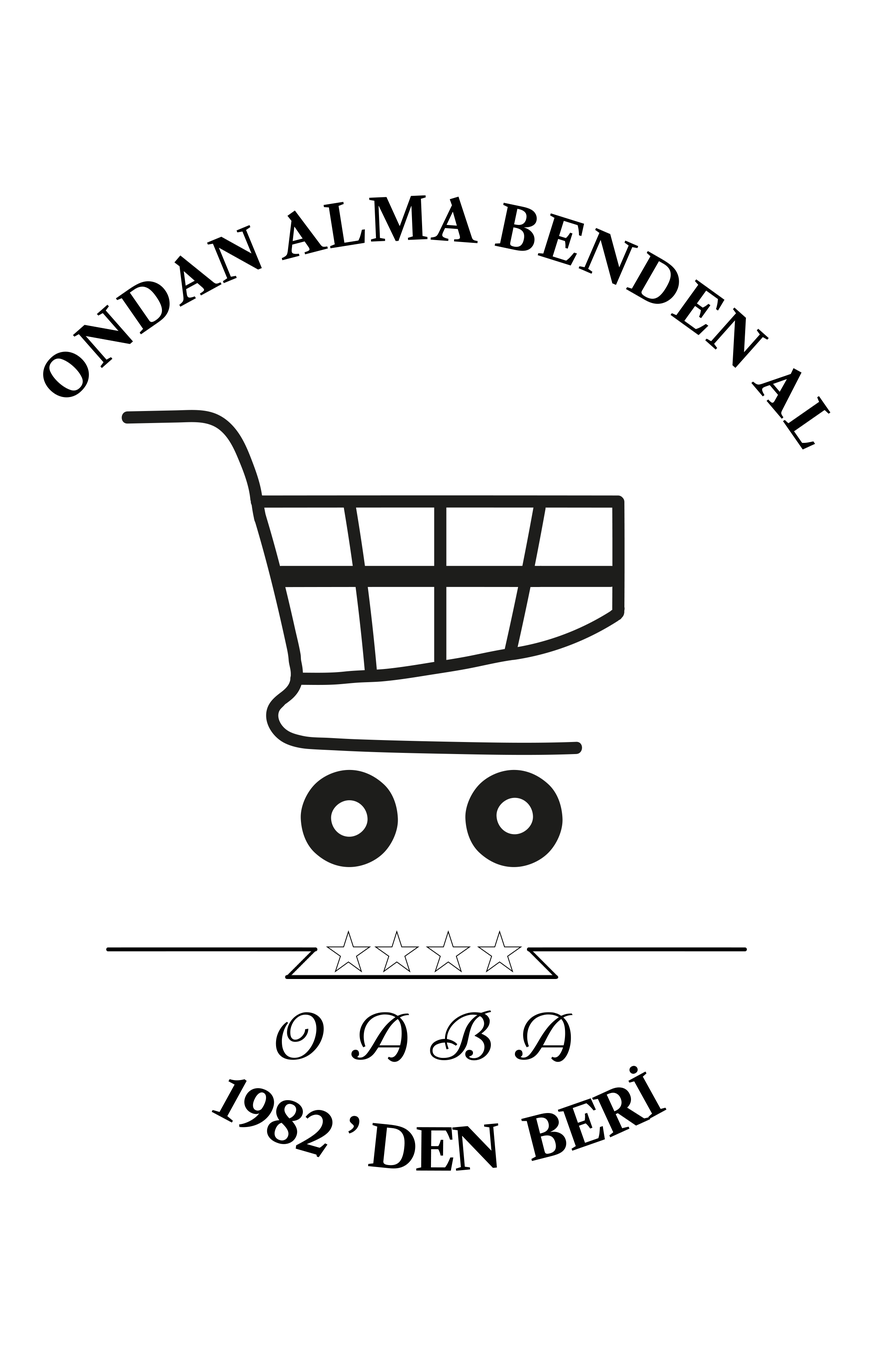
<style>
.page{position:relative;width:883px;height:1350px;background:#ffffff}
.page>*{position:absolute;margin:0}
.t1{font:56.9px "LibreCaslonText-Bold";color:#000000}
.t2{font:66.2px "Niconne-Regular";color:#000000}
.t3{font:56.7px "LibreCaslonText-Bold";color:#000000}
</style>
<div class="page">
<p class="t1" style="left:43px;top:195px;width:788px;height:254px;text-align:justify">ONDAN ALMA BENDEN AL</p>
<p class="t2" style="left:276px;top:1012px;width:48px;height:48px">O</p>
<p class="t2" style="left:352px;top:1012px;width:57px;height:50px">A</p>
<p class="t2" style="left:430px;top:1010px;width:61px;height:50px">B</p>
<p class="t2" style="left:515px;top:1012px;width:58px;height:50px">A</p>
<p class="t3" style="left:212px;top:1066px;width:455px;height:105px;text-align:justify">1982 ’ DEN  BERİ</p>
</div>
